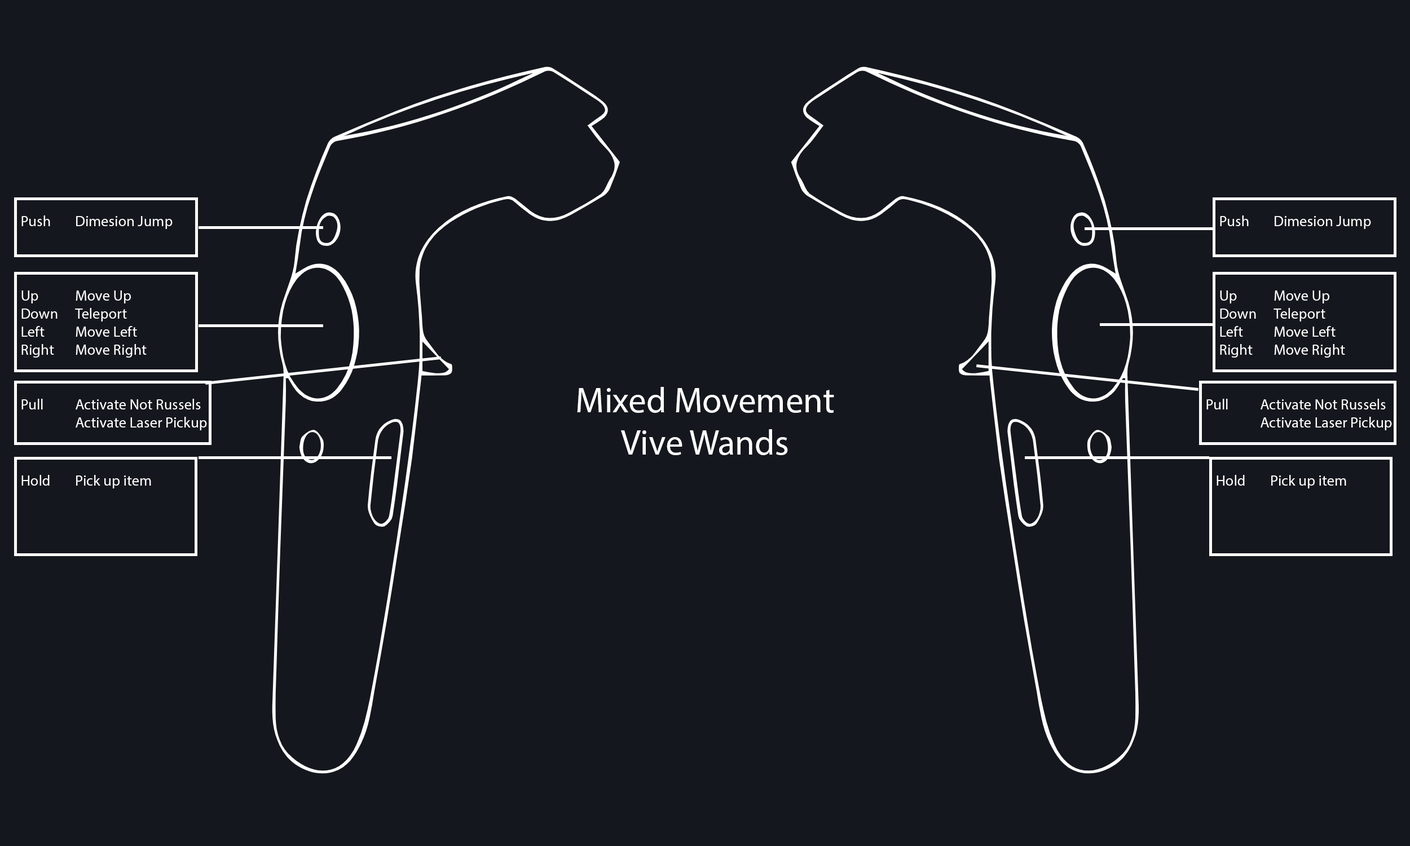
<style>
.page{position:relative;width:1410px;height:846px;background:#15171e}
.page>*{position:absolute;margin:0}
.t1{font:15px "MyriadPro-Regular";color:#ffffff}
.t2{font:35.4px "MyriadPro-Regular";color:#ffffff}
</style>
<div class="page">
<p class="t1" style="left:21px;top:215px;width:152px;height:14px">Push  Dimesion Jump</p>
<p class="t1" style="left:1220px;top:215px;width:151px;height:14px">Push  Dimesion Jump</p>
<p class="t1" style="left:21px;top:290px;width:126px;height:68px">Up    Move Up<br>  Down   Teleport<br>  Left    Move Left<br>  Right   Move Right</p>
<p class="t1" style="left:1220px;top:290px;width:125px;height:68px">Up    Move Up<br>  Down   Teleport<br>  Left    Move Left<br>  Right   Move Right</p>
<p class="t2" style="left:577px;top:387px;width:257px;height:68px;text-align:center">Mixed Movement<br>Vive Wands</p>
<p class="t1" style="left:21px;top:399px;width:186px;height:31px">Pull    Activate Not Russels<br>   Activate Laser Pickup</p>
<p class="t1" style="left:1206px;top:399px;width:186px;height:31px">Pull    Activate Not Russels<br>   Activate Laser Pickup</p>
<p class="t1" style="left:21px;top:475px;width:130px;height:13px">Hold   Pick up item</p>
<p class="t1" style="left:1216px;top:475px;width:130px;height:13px">Hold   Pick up item</p>
</div>
